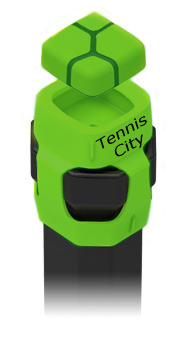
<style>
.page{position:relative;width:189px;height:349px;background:#ffffff}
.page>*{position:absolute;margin:0}
.t1{font:14px/15px "Verdana";color:#000000;font-style:italic;scale:1.24 1}
</style>
<div class="page">
<p class="t1" style="left:95px;top:116px;width:52px;height:41px;text-align:center;rotate:-30deg">Tennis<br>City</p>
</div>
